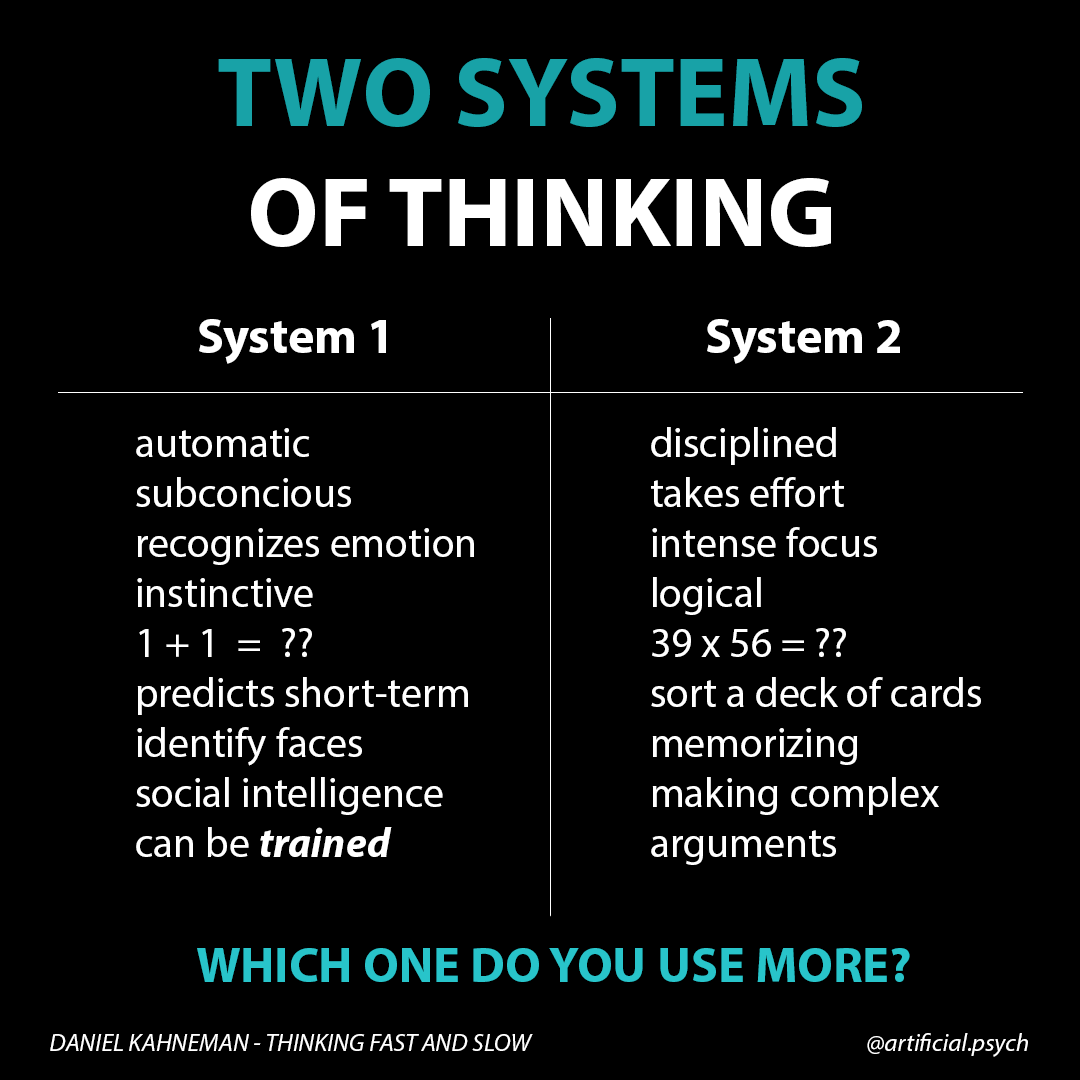
<style>
.page{position:relative;width:1080px;height:1080px;background:#000000}
.page>*{position:absolute;margin:0}
.t1{font:100px "MyriadPro-Bold";color:#18a2a7}
.t2{font:100px "MyriadPro-Bold";color:#ffffff}
.t3{font:50px "MyriadPro-Bold";color:#ffffff}
.t4{font:41.7px "MyriadPro-Regular";color:#ffffff}
.t5{font:41.7px "MyriadPro-BoldIt";color:#ffffff}
.t6{font:50px "MyriadPro-Bold";color:#28c4ca}
.t7{font:25px "MyriadPro-It";color:#ffffff}
</style>
<div class="page">
<p class="t1" style="left:218px;top:58px;width:644px;height:189px;text-align:center">TWO SYSTEMS<br><span class="t2">OF THINKING</span></p>
<p class="t3" style="left:199px;top:319px;width:187px;height:45px">System 1</p>
<p class="t3" style="left:707px;top:319px;width:193px;height:45px">System 2</p>
<p class="t4" style="left:136px;top:428px;width:338px;height:429px">automatic<br>subconcious <br>recognizes emotion <br>instinctive <br>1 + 1  =  ?? <br>predicts short-term<br>identify faces<br>social intelligence<br>can be <span class="t5">trained</span></p>
<p class="t4" style="left:651px;top:427px;width:330px;height:438px">disciplined<br>takes effort <br>intense focus<br>logical <br>39 x 56 = ??<br>sort a deck of cards<br>memorizing <br>making complex <br>arguments</p>
<p class="t6" style="left:197px;top:948px;width:713px;height:34px">WHICH ONE DO YOU USE MORE?</p>
<p class="t7" style="left:50px;top:1034px;width:483px;height:17px">DANIEL KAHNEMAN - THINKING FAST AND SLOW</p>
<p class="t7" style="left:867px;top:1033px;width:161px;height:24px">@artificial.psych</p>
</div>
